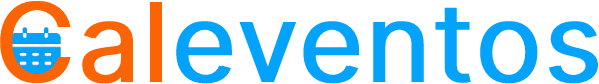
<style>
.page{position:relative;width:599px;height:84px;background:#ffffff}
.page>*{position:absolute;margin:0}
.t1{font:110px "Inter-Regular";color:#04a3fb;font-weight:bold}
.t2{font:110px "Inter-Regular";color:#fb6404;font-weight:bold}
</style>
<div class="page">
<p class="t1" style="left:0px;top:0px;width:599px;height:84px"><span class="t2">Cal</span>eventos</p>
</div>
